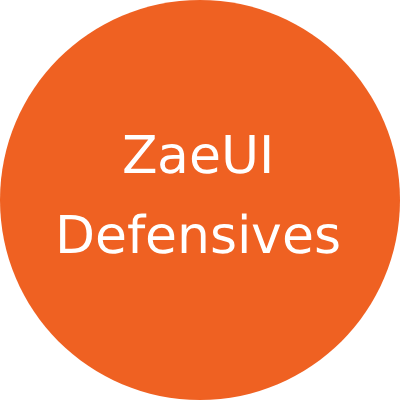
<style>
.page{position:relative;width:400px;height:400px;background:#ef6122}
.page>*{position:absolute;margin:0}
.t1{font:52px "DejaVuSans";color:#ffffff}
</style>
<div class="page">
<p class="t1" style="left:60px;top:135px;width:279px;height:119px;text-align:center">ZaeUI<br><br>Defensives</p>
</div>
